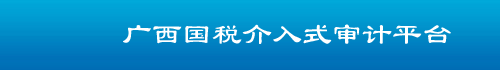
<style>
.page{position:relative;width:500px;height:70px}
.page>*{position:absolute;margin:0}
.t1{font:30px "LiSu";color:#ffffff}
</style>
<div class="page">
<p class="t1" style="left:123px;top:24px;width:328px;height:20px">广西国税介入式审计平台</p>
</div>
